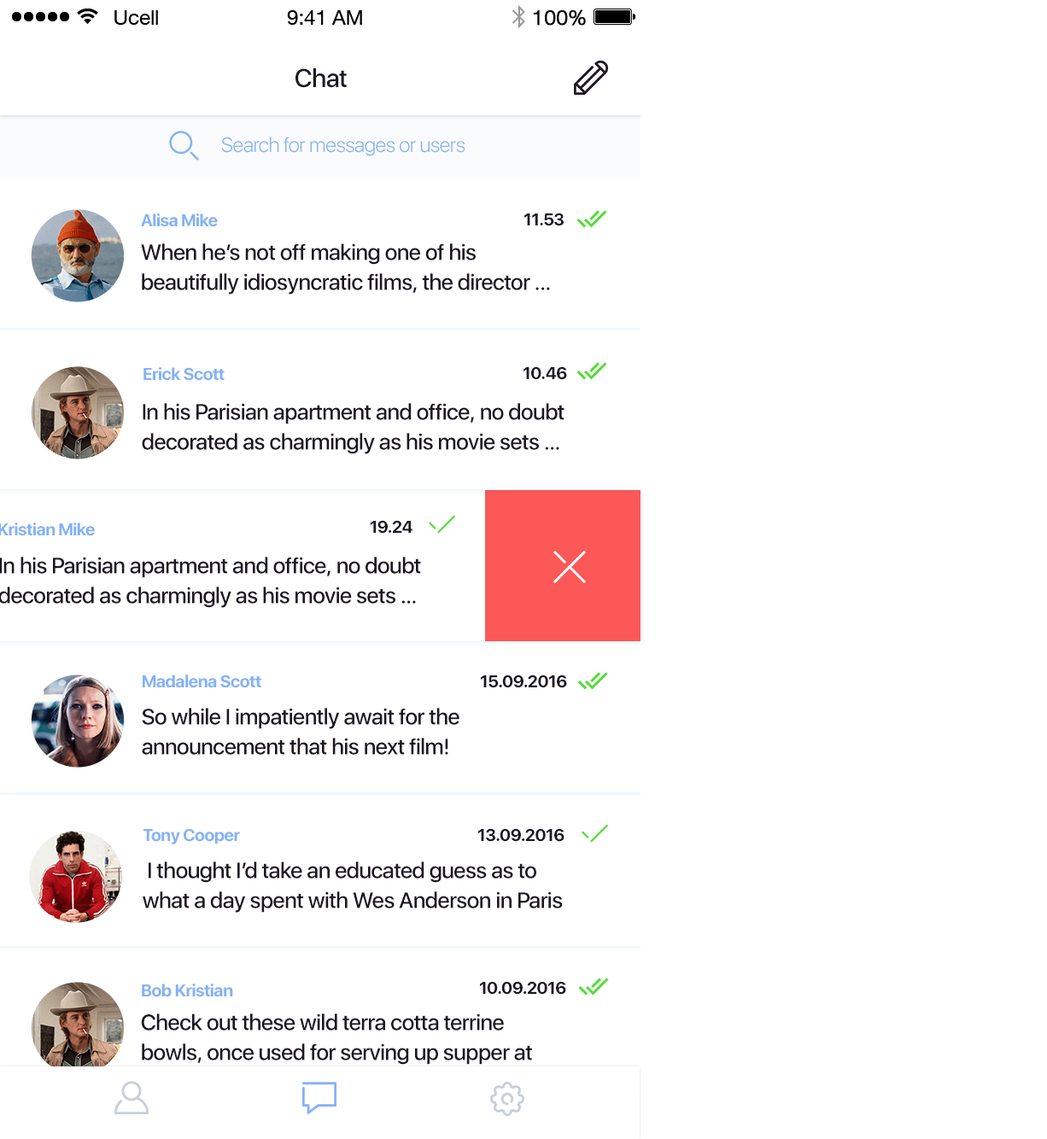
<style>
.page{position:relative;width:1047px;height:1139px;background:#ffffff}
.page>*{position:absolute;margin:0}
.t1{font:25.6px "SFUIDisplay-Medium";letter-spacing:-0.02em;color:#1c1721}
.t2{font:20.5px "SFUIDisplay-Light";letter-spacing:-0.02em;color:#85b2f6}
.t3{font:17.1px "SFUIDisplay-Bold";letter-spacing:-0.02em;color:#85b2f6}
.t4{font:17.1px "SFUIDisplay-Bold";letter-spacing:-0.02em;color:#1c1721}
.t5{font:22.2px/29.9px "SFUIDisplay-Medium";letter-spacing:-0.02em;color:#1c1721}
</style>
<div class="page">
<p class="t1" style="left:295px;top:68px;width:52px;height:20px">Chat</p>
<p class="t2" style="left:221px;top:137px;width:244px;height:19px">Search for messages or users</p>
<p class="t3" style="left:141px;top:213px;width:77px;height:14px">Alisa Mike</p>
<p class="t4" style="left:523px;top:213px;width:41px;height:13px">11.53</p>
<p class="t5" style="left:141px;top:243px;width:409px;height:52px">When he’s not off making one of his beautifully idiosyncratic films, the director ...</p>
<p class="t3" style="left:143px;top:367px;width:82px;height:14px">Erick Scott</p>
<p class="t4" style="left:523px;top:366px;width:44px;height:14px">10.46</p>
<p class="t5" style="left:142px;top:403px;width:422px;height:51px">In his Parisian apartment and office, no doubt decorated as charmingly as his movie sets ...</p>
<p class="t4" style="left:370px;top:520px;width:42px;height:14px">19.24</p>
<p class="t3" style="left:0px;top:523px;width:95px;height:13px">Kristian Mike</p>
<p class="t5" style="left:0px;top:557px;width:421px;height:51px">In his Parisian apartment and office, no doubt decorated as charmingly as his movie sets ...</p>
<p class="t3" style="left:143px;top:675px;width:118px;height:13px">Madalena Scott</p>
<p class="t4" style="left:480px;top:675px;width:87px;height:13px">15.09.2016</p>
<p class="t5" style="left:142px;top:708px;width:317px;height:47px">So while I impatiently await for the announcement that his next film!</p>
<p class="t3" style="left:143px;top:828px;width:97px;height:16px">Tony Cooper</p>
<p class="t4" style="left:477px;top:828px;width:87px;height:14px">13.09.2016</p>
<p class="t5" style="left:143px;top:862px;width:420px;height:51px">I thought I’d take an educated guess as to what a day spent with Wes Anderson in Paris</p>
<p class="t3" style="left:142px;top:984px;width:91px;height:13px">Bob Kristian</p>
<p class="t4" style="left:479px;top:981px;width:87px;height:14px">10.09.2016</p>
<p class="t5" style="left:141px;top:1014px;width:391px;height:81px">Check out these wild terra cotta terrine bowls, once used for serving up supper at royal hunting lodges</p>
</div>
